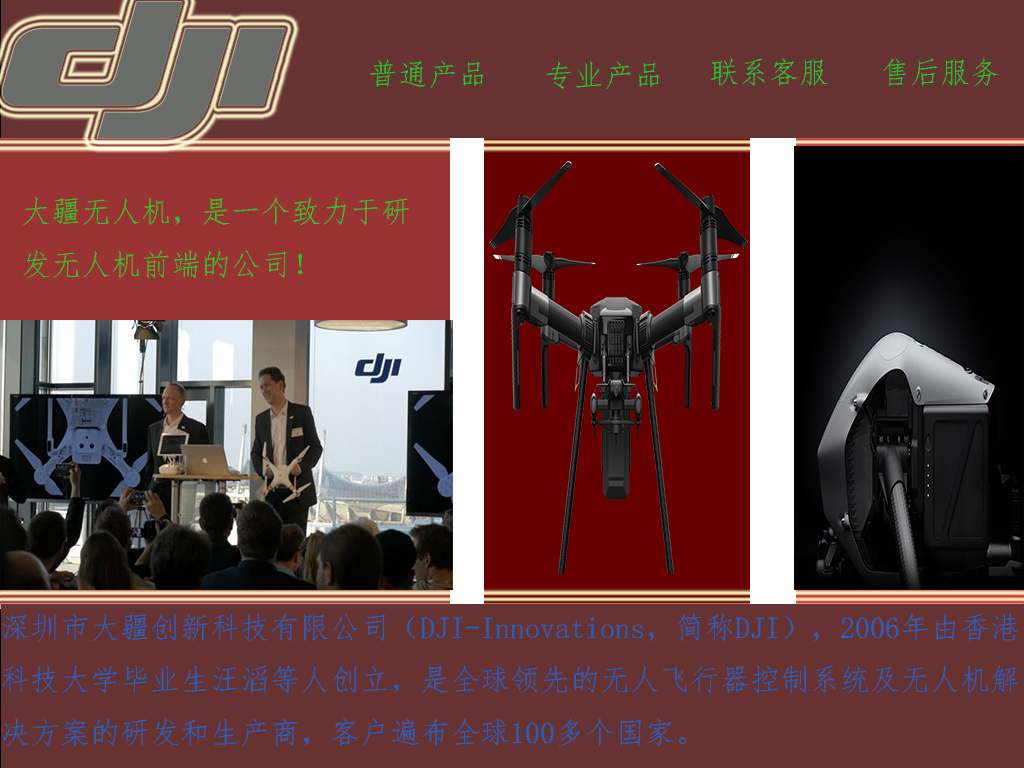
<style>
.page{position:relative;width:1024px;height:768px;background:#663332}
.page>*{position:absolute;margin:0}
.t1{font:30px "·ÂËÎ";color:#1865cd}
</style>
<div class="page">
<p class="t1" style="left:2px;top:613px;width:1016px;height:134px">深圳市大疆创新科技有限公司（DJI-Innovations，简称DJI），2006年由香港科技大学毕业生汪滔等人创立，是全球领先的无人飞行器控制系统及无人机解决方案的研发和生产商，客户遍布全球100多个国家。</p>
</div>
